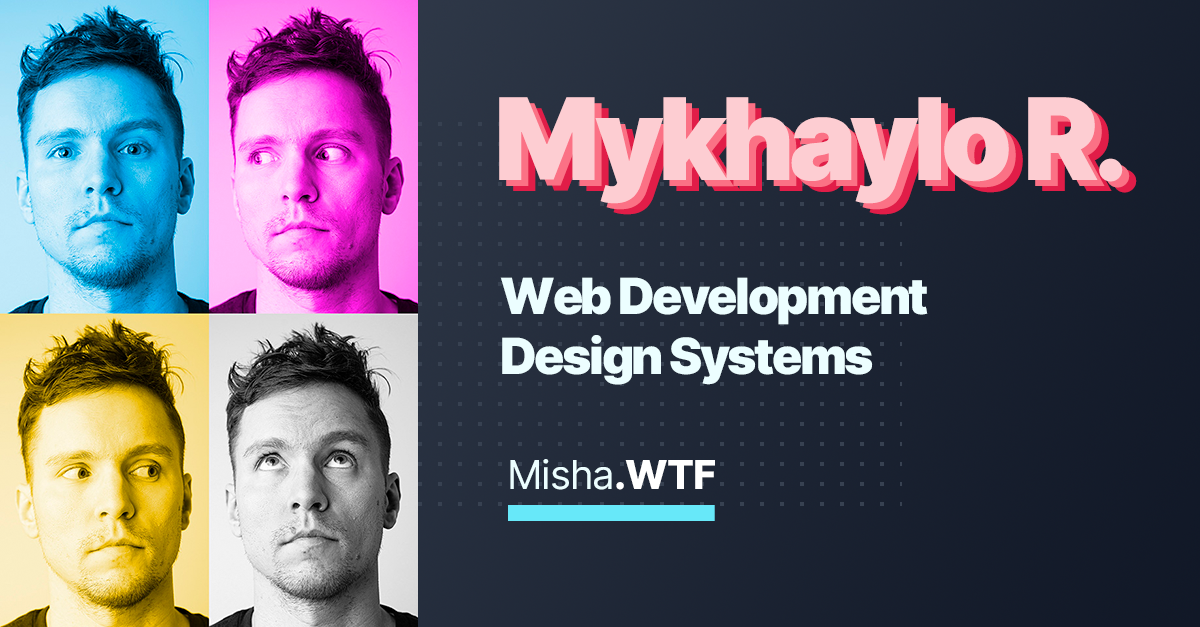
<style>
.page{position:relative;width:1200px;height:627px}
.page>*{position:absolute;margin:0}
.t1{font:113.6px "Inter-Black";letter-spacing:-0.05em;color:#fdcdd2}
.t2{font:113.6px "Inter-Black";letter-spacing:-0.05em}
.t3{font:50px "Inter-Black";letter-spacing:-0.05em;color:#ecfeff}
.t4{font:40px "Inter-Regular";letter-spacing:-0.025em;color:#ecfeff}
.t5{font:40px "Inter-ExtraBold";letter-spacing:-0.025em;color:#ffffff}
</style>
<div class="page">
<p class="t1" style="left:499px;top:97px;width:624px;height:107px">Mykhaylo R.</p>
<p class="t1" style="left:506px;top:103px;width:624px;height:107px">Mykhaylo R.</p>
<p class="t2" style="left:513px;top:108px;width:624px;height:107px">Mykhaylo R.</p>
<p class="t3" style="left:500px;top:277px;width:428px;height:108px">Web Development<br>Design Systems</p>
<p class="t4" style="left:510px;top:459px;width:205px;height:31px">Misha<span class="t5">.WTF</span></p>
</div>
